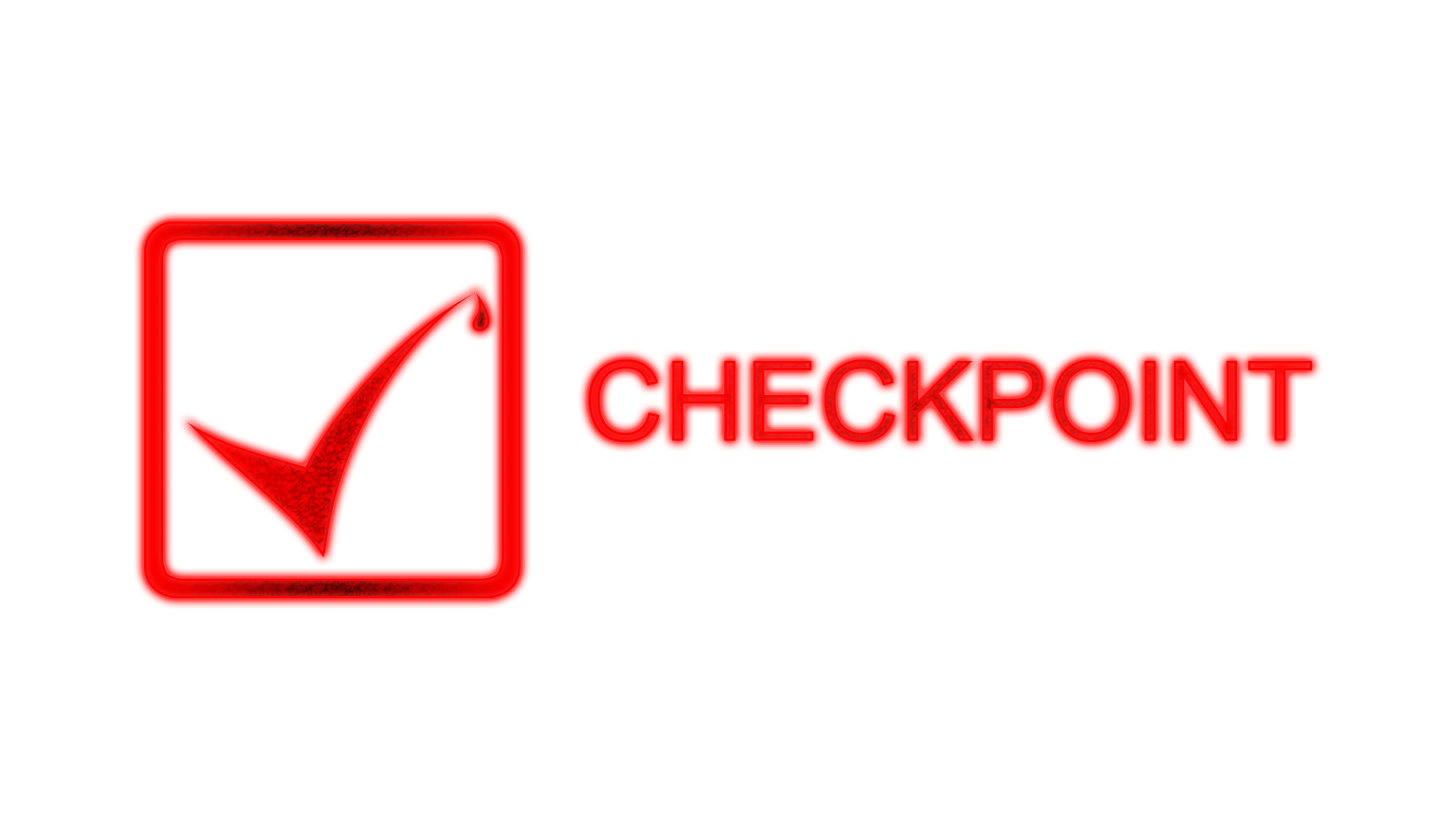
<style>
.page{position:relative;width:1456px;height:819px;background:#ffffff}
.page>*{position:absolute;margin:0}
.t1{font:111.5px "ArialMT";color:#ff0000}
</style>
<div class="page">
<p class="t1" style="left:588px;top:359px;width:724px;height:83px">CHECKPOINT</p>
</div>
